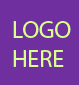
<style>
.page{position:relative;width:79px;height:85px;background:#6f2f9e}
.page>*{position:absolute;margin:0}
.t1{font:24px "MyriadPro-Regular";color:#d9ff8e}
</style>
<div class="page">
<p class="t1" style="left:13px;top:21px;width:58px;height:46px">LOGO<br>HERE</p>
</div>
